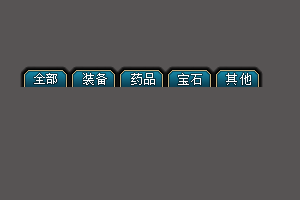
<style>
.page{position:relative;width:300px;height:200px;background:#575454}
.page>*{position:absolute;margin:0}
.t1{font:12px "SimSun";color:#ffffff}
.t2{font:12px "SimSun";letter-spacing:0.08em;color:#ffffff}
.t3{font:12px "SimSun";letter-spacing:0.06em;color:#ffffff}
.t4{font:12px "SimSun";letter-spacing:0.16em;color:#ffffff}
</style>
<div class="page">
<p class="t1" style="left:34px;top:73px;width:23px;height:11px">全部</p>
<p class="t2" style="left:83px;top:73px;width:24px;height:12px">装备</p>
<p class="t2" style="left:131px;top:73px;width:24px;height:12px">药品</p>
<p class="t3" style="left:178px;top:73px;width:24px;height:12px">宝石</p>
<p class="t4" style="left:226px;top:73px;width:25px;height:12px">其他</p>
</div>
